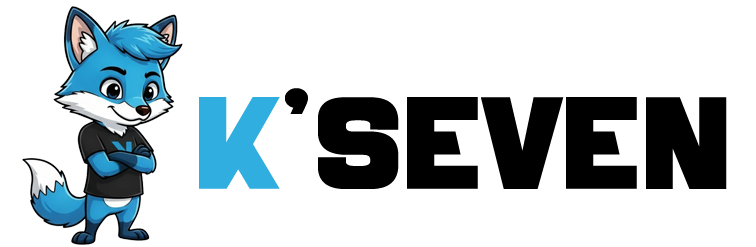
<style>
.page{position:relative;width:756px;height:247px;background:#ffffff}
.page>*{position:absolute;margin:0}
.t1{font:125.5px "BabellBold";color:#000000;scale:1.17 1}
.t2{font:125.5px "BabellBold";color:#30aedf;scale:1.17 1}
</style>
<div class="page">
<p class="t1" style="left:199px;top:88px;width:528px;height:101px"><span class="t2">K</span>’Seven</p>
</div>
